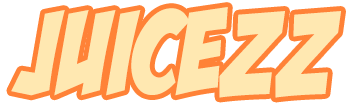
<style>
.page{position:relative;width:352px;height:106px;background:#ffe8b1}
.page>*{position:absolute;margin:0}
.t1{font:117.8px "BadaBoomBB";color:#ffe8b1}
</style>
<div class="page">
<p class="t1" style="left:11px;top:7px;width:330px;height:91px">Juicezz</p>
</div>
